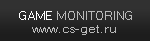
<style>
.page{position:relative;width:150px;height:41px;background:#313131}
.page>*{position:absolute;margin:0}
.t1{font:11.1px "MicrosoftSansSerif";color:#b9b9b9;scale:1.1 1}
.t2{font:11.1px "MicrosoftSansSerif";color:#ffffff;scale:1.1 1}
.t3{font:11.8px "MicrosoftSansSerif";color:#b9b9b9;scale:1.17 1}
</style>
<div class="page">
<p class="t1" style="left:19px;top:11px;width:113px;height:9px"><span class="t2">GAME </span>MONITORING</p>
<p class="t3" style="left:32px;top:25px;width:84px;height:10px">www.cs-get.ru</p>
</div>
